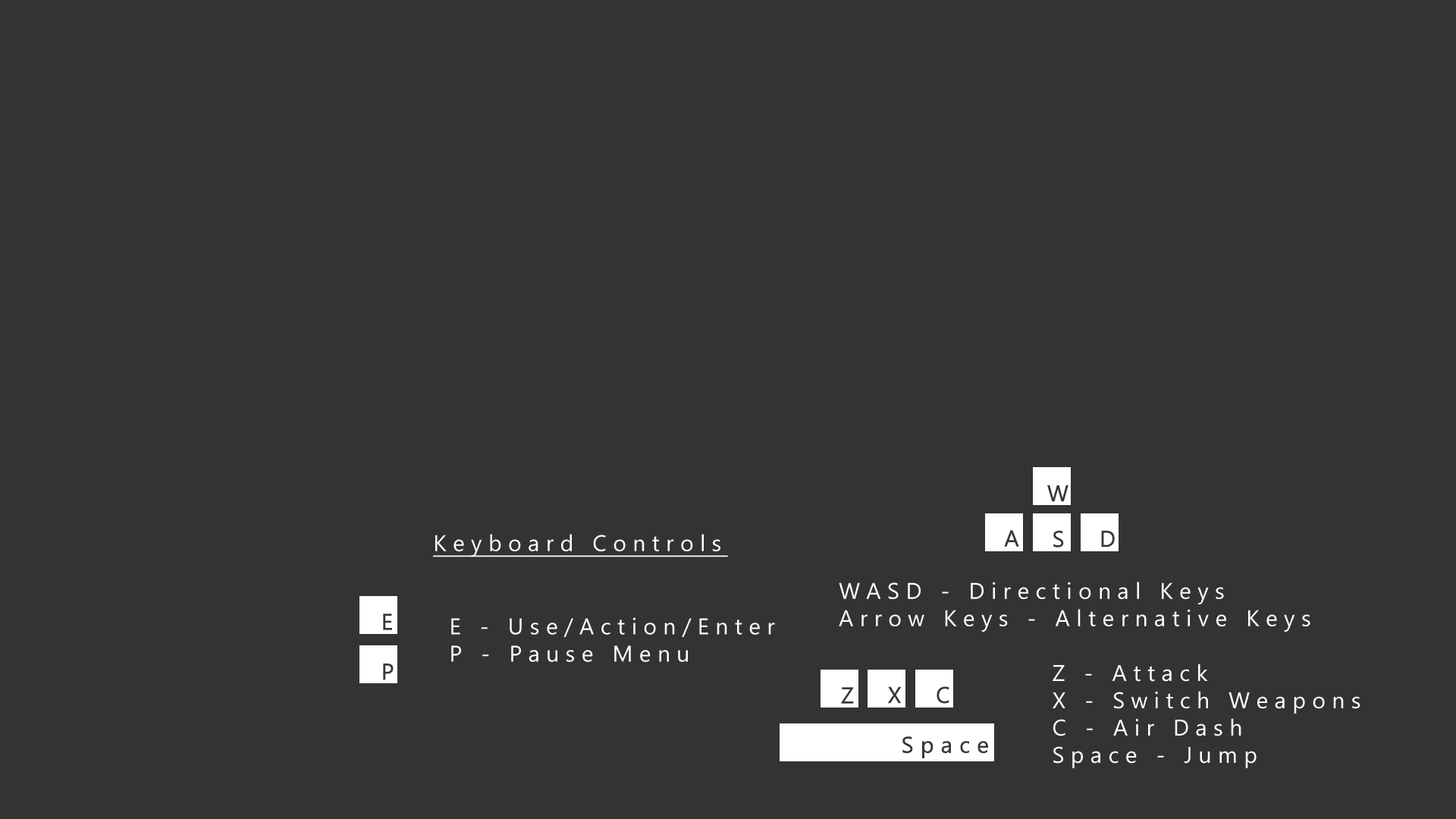
<style>
.page{position:relative;width:1456px;height:819px;background:#333333}
.page>*{position:absolute;margin:0}
.t1{font:22.7px "MicrosoftTaiLe";letter-spacing:0.28em;color:#373737;font-weight:bold}
.t2{font:22.7px "MicrosoftTaiLe";letter-spacing:0.28em;color:#ffffff;text-decoration:underline}
.t3{font:22.7px "MicrosoftTaiLe";letter-spacing:0.28em;color:#ffffff}
</style>
<div class="page">
<p class="t1" style="left:1047px;top:485px;width:21px;height:17px">W</p>
<p class="t2" style="left:433px;top:534px;width:295px;height:23px">Keyboard Controls</p>
<p class="t1" style="left:1004px;top:530px;width:15px;height:17px">A</p>
<p class="t1" style="left:1053px;top:530px;width:11px;height:18px">S</p>
<p class="t1" style="left:1101px;top:530px;width:14px;height:18px">D</p>
<p class="t3" style="left:839px;top:582px;width:471px;height:50px">WASD - Directional Keys<br>Arrow Keys - Alternative Keys</p>
<p class="t1" style="left:383px;top:613px;width:9px;height:17px">E</p>
<p class="t3" style="left:451px;top:617px;width:324px;height:45px">E - Use/Action/Enter<br>P - Pause Menu</p>
<p class="t1" style="left:383px;top:664px;width:11px;height:16px">P</p>
<p class="t3" style="left:1053px;top:664px;width:307px;height:104px">Z - Attack <br>X - Switch Weapons<br>C - Air Dash<br>Space - Jump</p>
<p class="t1" style="left:841px;top:687px;width:13px;height:17px">Z</p>
<p class="t1" style="left:888px;top:686px;width:13px;height:18px">X</p>
<p class="t1" style="left:937px;top:686px;width:12px;height:18px">C</p>
<p class="t1" style="left:902px;top:736px;width:86px;height:22px">Space</p>
</div>
